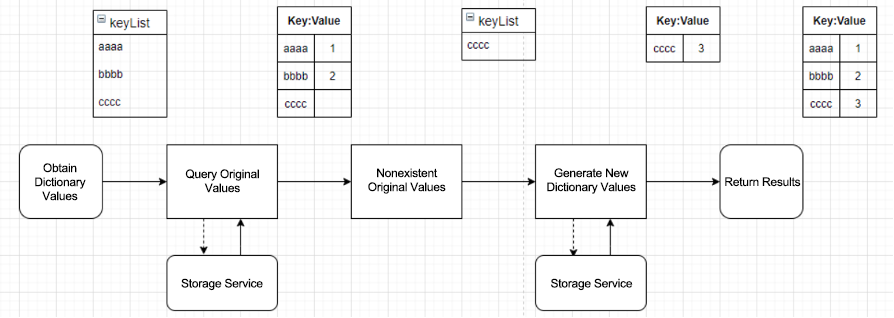
<style>
.page{position:relative;width:894px;height:318px;background:#ffffff}
.page>*{position:absolute;margin:0}
.t1{font:12px/14px "ArialMT";letter-spacing:-0.02em;color:#000000}
.t2{font:12px "ArialMT";letter-spacing:-0.02em;color:#000000}
</style>
<div class="page">
<p class="t1" style="left:35px;top:163px;width:51px;height:38px;text-align:center">Obtain Dictionary Values</p>
<p class="t1" style="left:185px;top:169px;width:74px;height:24px;text-align:center">Query Original Values</p>
<p class="t1" style="left:368px;top:168px;width:78px;height:26px;text-align:center">Nonexistent Original Values</p>
<p class="t1" style="left:547px;top:168px;width:89px;height:26px;text-align:center">Generate New Dictionary Values</p>
<p class="t2" style="left:725px;top:177px;width:76px;height:10px">Return Results</p>
<p class="t2" style="left:181px;top:278px;width:82px;height:13px">Storage Service</p>
<p class="t2" style="left:551px;top:278px;width:82px;height:13px">Storage Service</p>
</div>
